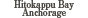
<style>
.page{position:relative;width:88px;height:18px;background:#ffffff}
.page>*{position:absolute;margin:0}
.t1{font:10px/8px "RyuminPro-ExBold";letter-spacing:-0.04em;color:#4c4843;scale:0.9 1}
</style>
<div class="page">
<p class="t1" style="left:14px;top:0px;width:60px;height:18px;text-align:center">Hitokappu Bay<br>Anchorage</p>
</div>
